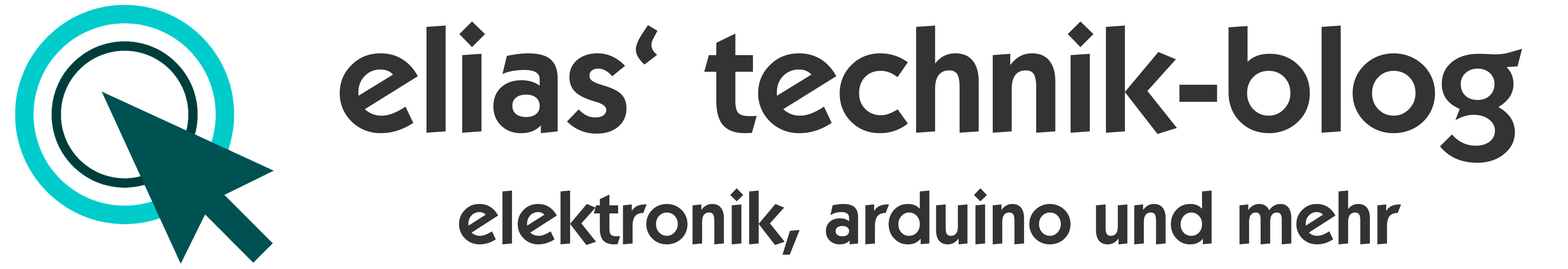
<style>
.page{position:relative;width:1568px;height:269px;background:#ffffff}
.page>*{position:absolute;margin:0}
.t1{font:74.7px/112px "KabelITCbyBT-Demi";color:#333333}
.t2{font:149.3px/112px "KabelITCbyBT-Demi";color:#333333}
</style>
<div class="page">
<p class="t1" style="left:340px;top:22px;width:1182px;height:232px;text-align:center"><span class="t2">elias‘ technik-blog<br></span>elektronik, arduino und mehr</p>
</div>
